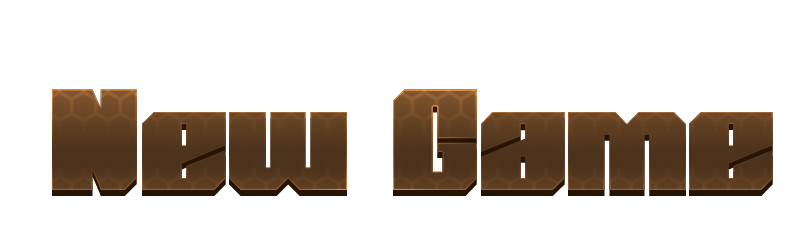
<style>
.page{position:relative;width:800px;height:250px;background:#ffffff}
.page>*{position:absolute;margin:0}
.t1{font:150px "PowerChord";color:#4c321b}
</style>
<div class="page">
<p class="t1" style="left:52px;top:89px;width:721px;height:101px">New Game</p>
</div>
